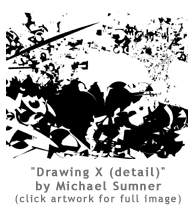
<style>
.page{position:relative;width:196px;height:213px;background:#ffffff}
.page>*{position:absolute;margin:0}
.t1{font:12px "TrebuchetMS";letter-spacing:0.1em;color:#727272;font-weight:bold}
.t2{font:10px "TrebuchetMS";letter-spacing:0.1em;color:#727272;font-weight:bold}
</style>
<div class="page">
<p class="t1" style="left:15px;top:167px;width:166px;height:38px;text-align:center">"Drawing X (detail)"<br>by Michael Sumner<br><span class="t2">(click artwork for full image)</span></p>
</div>
